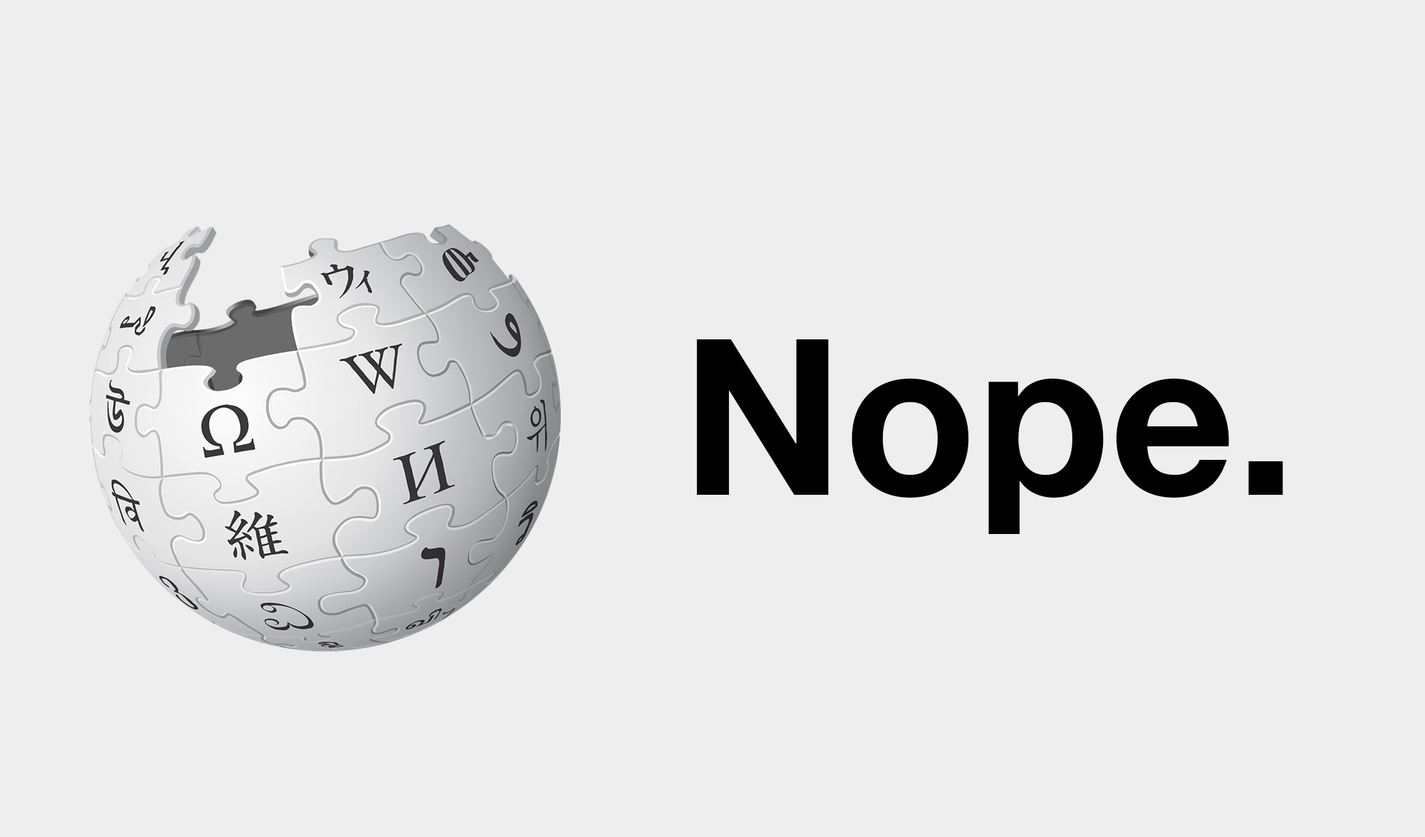
<style>
.page{position:relative;width:1425px;height:837px;background:#eeeeee}
.page>*{position:absolute;margin:0}
.t1{font:218.3px "HelveticaNeue-Bold";color:#000000}
</style>
<div class="page">
<p class="t1" style="left:697px;top:339px;width:586px;height:195px">Nope.</p>
</div>
